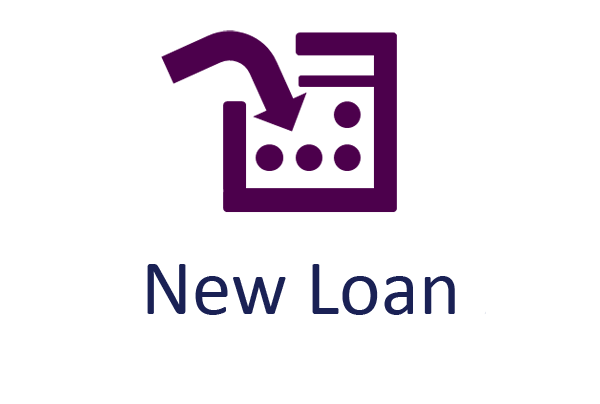
<style>
.page{position:relative;width:600px;height:404px;background:#ffffff}
.page>*{position:absolute;margin:0}
.t1{font:79.2px "Calibri";color:#1a2155}
</style>
<div class="page">
<p class="t1" style="left:147px;top:264px;width:308px;height:51px">New Loan</p>
</div>
